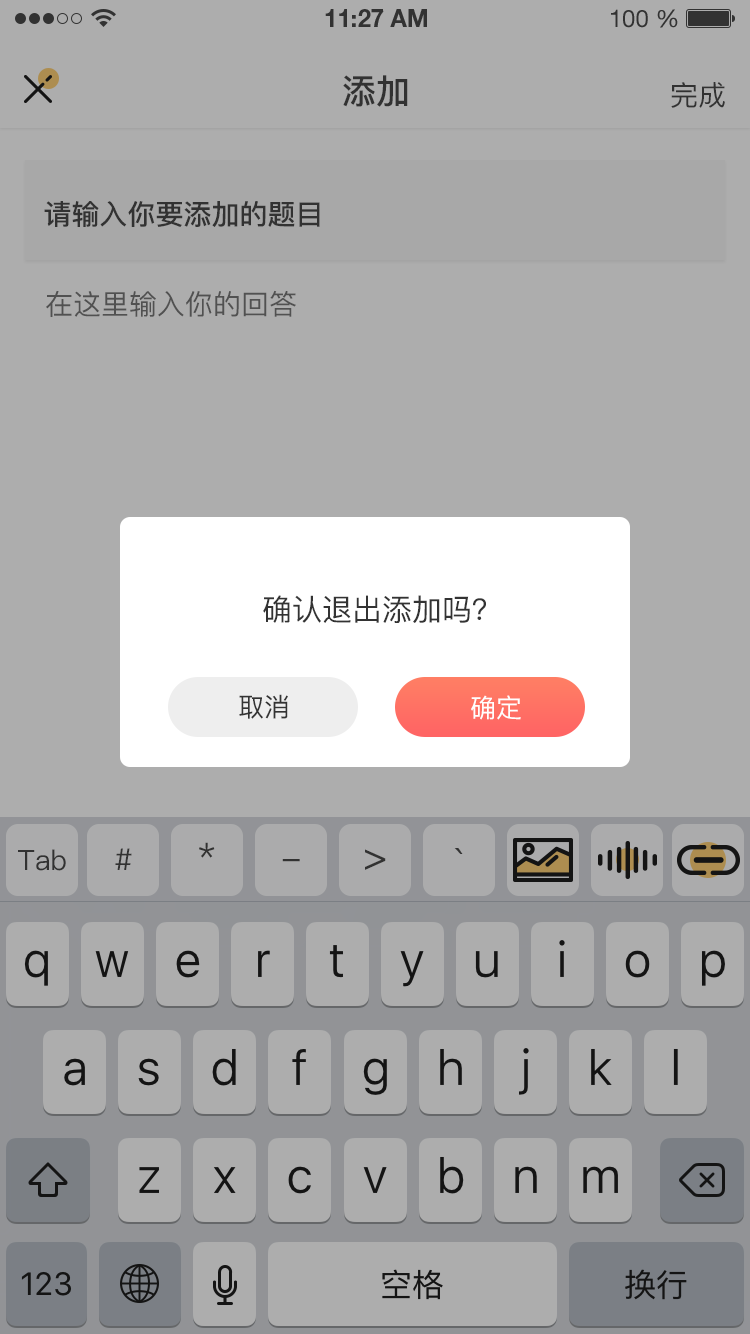
<style>
.page{position:relative;width:750px;height:1334px;background:#adadad}
.page>*{position:absolute;margin:0}
.t1{font:34px "PingFang-SC-Bold";color:#333333;text-transform:uppercase}
.t2{font:28px "PingFang-SC-Medium";color:#333333;text-transform:uppercase}
.t3{font:28px "PingFang-SC-Bold";color:#333333;text-transform:uppercase}
.t4{font:28px "PingFang-SC-Medium";color:#666666;text-transform:uppercase}
.t5{font:30px "PingFang-SC-Medium";color:#333333;text-transform:uppercase}
.t6{font:26px "PingFang-SC-Medium";color:#333333;text-transform:uppercase}
.t7{font:26px "PingFang-SC-Medium";color:#fffefe;text-transform:uppercase}
.t8{font:34px "PingFang-SC-Medium";color:#333333}
.t9{font:28px "PingFang-SC-Medium";color:#333333}
.t10{font:30px "PingFang-SC-Medium";color:#333333}
.t11{font:40px "PingFang-SC-Medium";color:#333333}
</style>
<div class="page">
<p class="t1" style="left:343px;top:75px;width:65px;height:32px">添加</p>
<p class="t2" style="left:671px;top:82px;width:54px;height:26px">完成</p>
<p class="t3" style="left:44px;top:201px;width:276px;height:26px">请输入你要添加的题目</p>
<p class="t4" style="left:46px;top:290px;width:250px;height:27px">在这里输入你的回答</p>
<p class="t5" style="left:263px;top:595px;width:223px;height:28px">确认退出添加吗？</p>
<p class="t6" style="left:239px;top:694px;width:49px;height:25px">取消</p>
<p class="t7" style="left:471px;top:695px;width:50px;height:25px">确定</p>
<p class="t8" style="left:199px;top:842px;width:16px;height:16px">*</p>
<p class="t9" style="left:18px;top:849px;width:48px;height:22px"><span class="t2">T</span>ab</p>
<p class="t10" style="left:115px;top:848px;width:17px;height:22px">#</p>
<p class="t11" style="left:365px;top:849px;width:21px;height:21px">&gt;</p>
<p class="t11" style="left:454px;top:848px;width:9px;height:6px">`</p>
<p class="t8" style="left:282px;top:859px;width:18px;height:3px">-</p>
</div>
